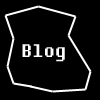
<style>
.page{position:relative;width:100px;height:100px;background:#000000}
.page>*{position:absolute;margin:0}
.t1{font:18px "Fixedsys";color:#ffffff}
</style>
<div class="page">
<p class="t1" style="left:22px;top:44px;width:43px;height:18px">Blog</p>
</div>
